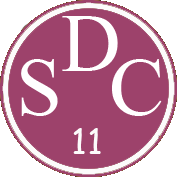
<style>
.page{position:relative;width:177px;height:177px;background:#9d426b}
.page>*{position:absolute;margin:0}
.t1{font:100px "ShonarBangla";color:#ffffff}
.t2{font:35px "ComicSansMS";color:#fcfbfb}
</style>
<div class="page">
<p class="t1" style="left:62px;top:16px;width:56px;height:55px">D</p>
<p class="t1" style="left:21px;top:59px;width:37px;height:57px">S</p>
<p class="t1" style="left:112px;top:59px;width:50px;height:57px">C</p>
<p class="t2" style="left:73px;top:128px;width:28px;height:26px">11</p>
</div>
